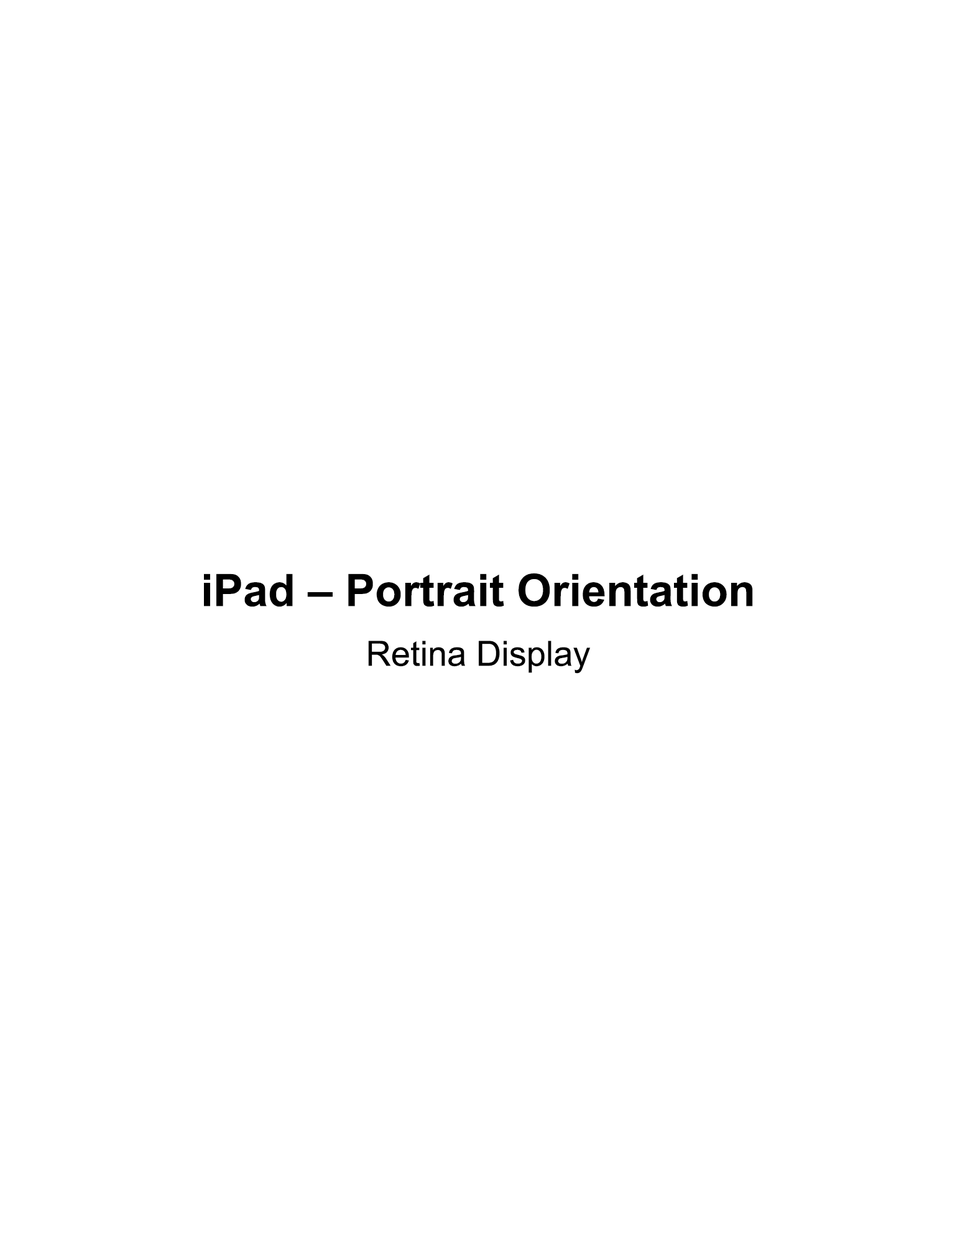
<style>
.page{position:relative;width:955px;height:1249px;background:#ffffff}
.page>*{position:absolute;margin:0}
.t1{font:44.8px/59.7px "Arial-BoldMT";color:#000000}
.t2{font:34.8px/59.7px "ArialMT";color:#000000}
</style>
<div class="page">
<p class="t1" style="left:204px;top:573px;width:549px;height:100px;text-align:center">iPad – Portrait Orientation<br><span class="t2">Retina Display</span></p>
</div>
